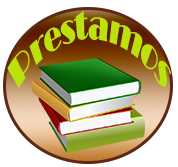
<style>
.page{position:relative;width:178px;height:167px;background:#ffffff}
.page>*{position:absolute;margin:0}
.t1{font:40.4px "Broadway";color:#bce20d;scale:0.6 1}
</style>
<div class="page">
<p class="t1" style="left:7px;top:11px;width:164px;height:77px">Prestamos</p>
</div>
